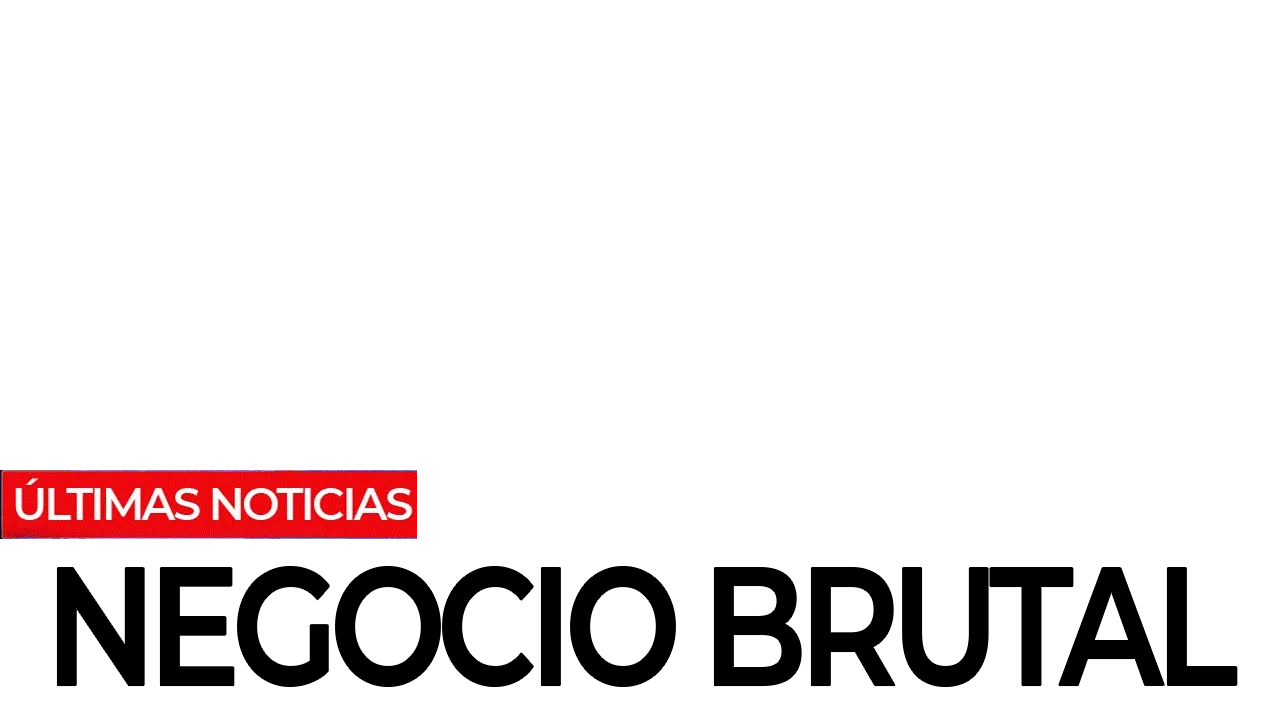
<style>
.page{position:relative;width:1280px;height:720px;background:#ffffff}
.page>*{position:absolute;margin:0}
.t1{font:165.8px "Montserrat-SemiBold";letter-spacing:-0.06em;color:#000000;scale:0.83 1}
</style>
<div class="page">
<p class="t1" style="left:57px;top:567px;width:1180px;height:119px">NEGOCIO BRUTAL</p>
</div>
